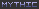
<style>
.page{position:relative;width:39px;height:9px;background:#333333}
.page>*{position:absolute;margin:0}
.t1{font:8px "5x5-Pixel"}
</style>
<div class="page">
<p class="t1" style="left:2px;top:2px;width:35px;height:5px">mythic</p>
</div>
